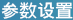
<style>
.page{position:relative;width:73px;height:20px}
.page>*{position:absolute;margin:0}
.t1{font:18px "LiHeiPro";color:#ffffff}
</style>
<div class="page">
<p class="t1" style="left:1px;top:2px;width:72px;height:17px">参数设置</p>
</div>
